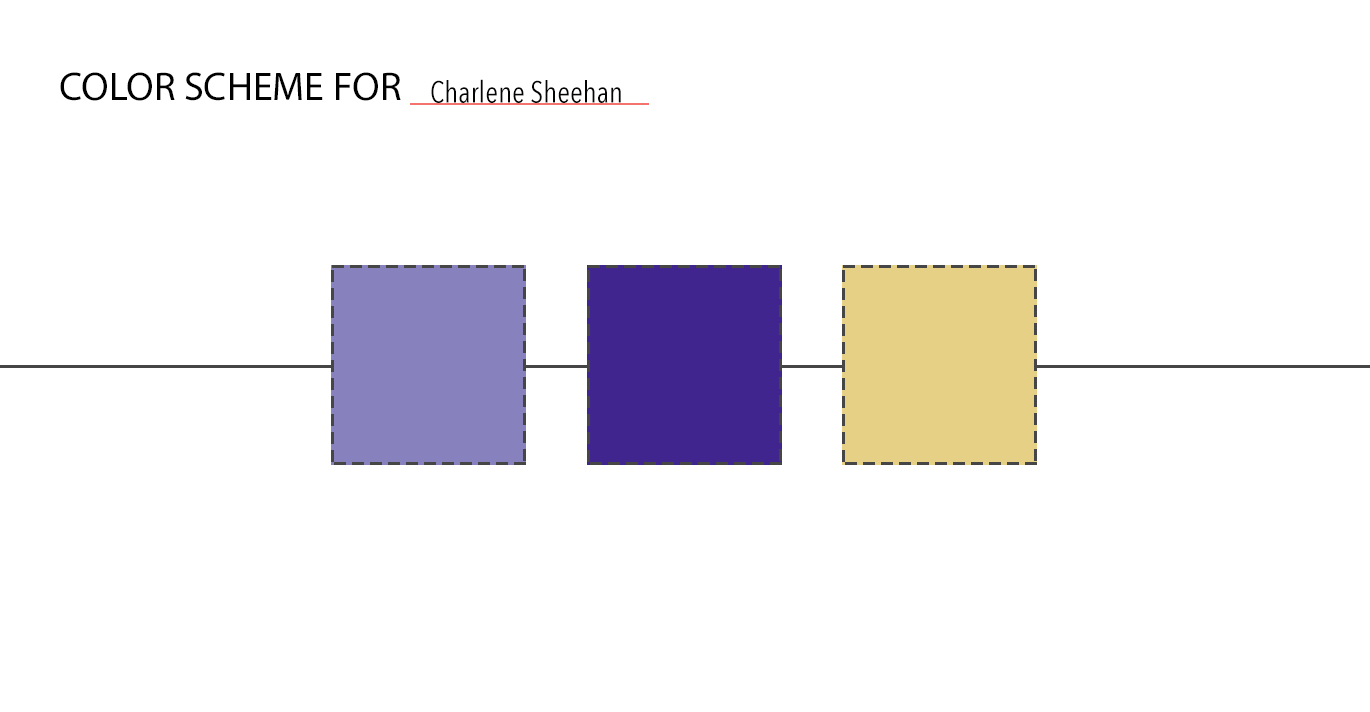
<style>
.page{position:relative;width:1370px;height:712px;background:#ffffff}
.page>*{position:absolute;margin:0}
.t1{font:40px "MyriadPro-Regular";color:#000000;text-transform:uppercase}
.t2{font:40px "MyriadPro-Regular";color:#f3736e;text-transform:uppercase}
.t3{font:30px "AvenirNextCondensed-Regular";color:#040404}
</style>
<div class="page">
<p class="t1" style="left:60px;top:72px;width:589px;height:33px">Color Scheme for <span class="t2">____________</span></p>
<p class="t3" style="left:431px;top:79px;width:190px;height:24px">Charlene Sheehan</p>
</div>
